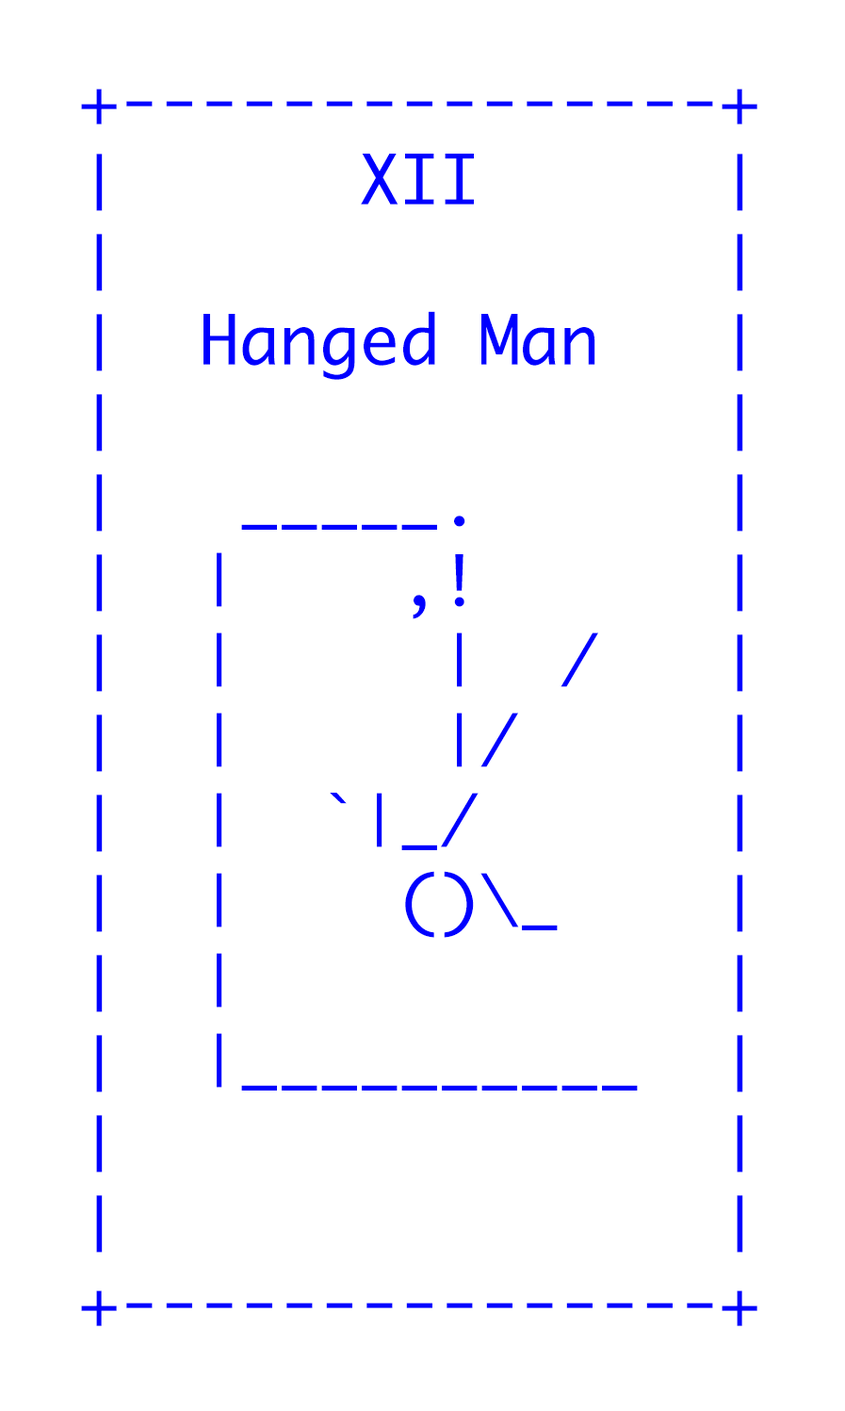
<style>
.page{position:relative;width:845px;height:1411px;background:#ffffff}
.page>*{position:absolute;margin:0}
.t1{font:66.7px "Monaco";color:#0000ff}
</style>
<div class="page">
<p class="t1" style="left:81px;top:89px;width:677px;height:1237px">+---------------+<br>│      XII      │<br>│               │<br>│  Hanged Man   │<br>│               │  <br>│   _____.      │ <br>│  |    ,!      │ <br>│  |     |  /   │ <br>│  |     |/     │  <br>│  |  `|_/      │ <br>│  |    ()\_    │<br>│  |            │ <br>│  |__________  │<br>│               │<br>│               │<br>+---------------+<br><br><br><br><br>├───────────────┤</p>
</div>
